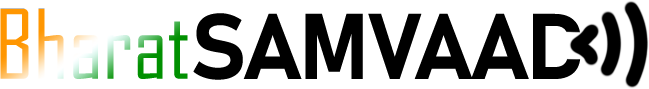
<style>
.page{position:relative;width:649px;height:89px;background:#ffffff}
.page>*{position:absolute;margin:0}
.t1{font:91.4px "AgencyFB-Reg"}
.t2{font:91.4px "Bahnschrift-Bold";letter-spacing:-0.04em;color:#000000}
</style>
<div class="page">
<p class="t1" style="left:0px;top:8px;width:188px;height:71px">Bharat</p>
<p class="t2" style="left:193px;top:13px;width:336px;height:67px">SAMVAA</p>
</div>
